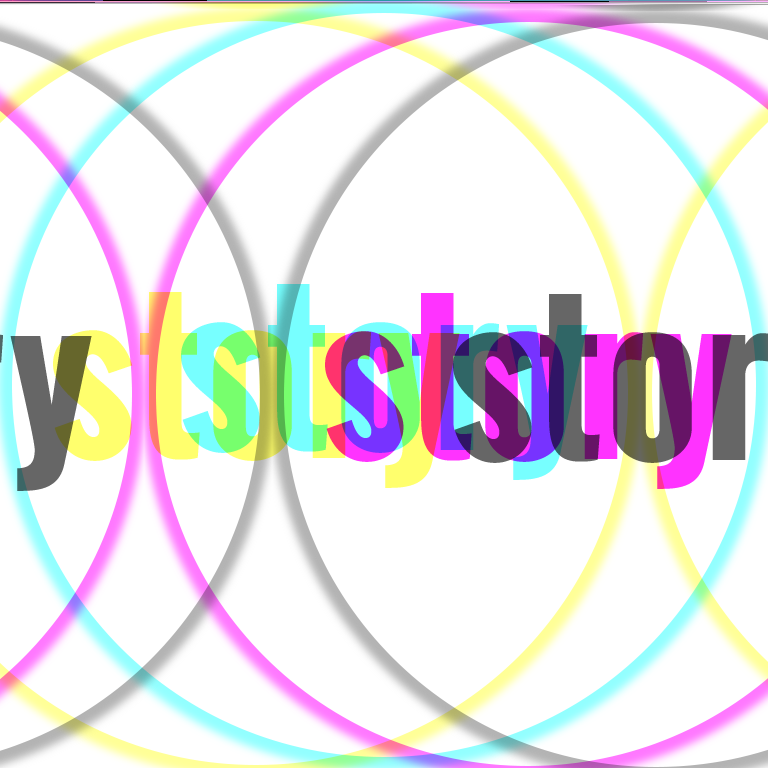
<style>
.page{position:relative;width:768px;height:768px;background:#ffffff}
.page>*{position:absolute;margin:0}
.t1{font:196px "Oswald-Bold";letter-spacing:0.025em}
</style>
<div class="page">
<p class="t1" style="left:181px;top:283px;width:407px;height:196px">story</p>
</div>
